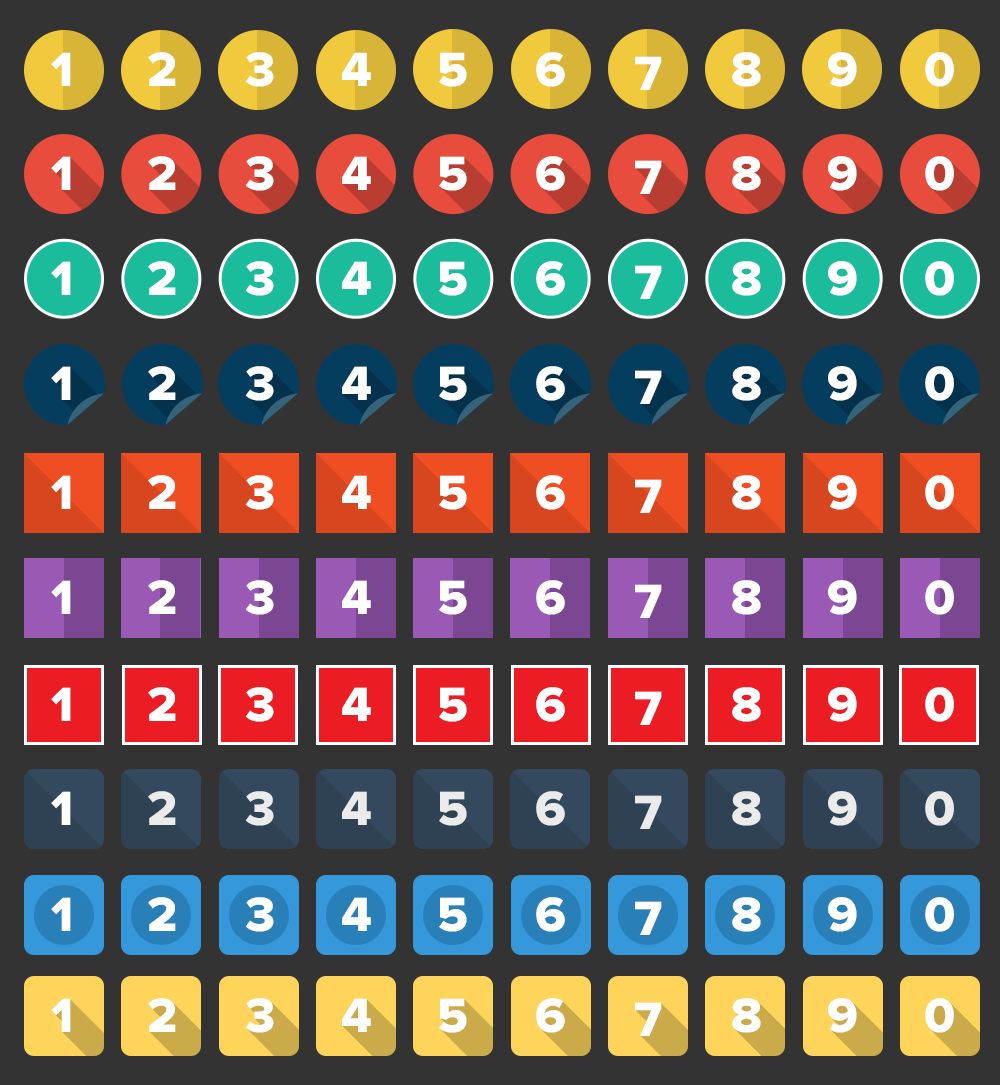
<style>
.page{position:relative;width:1000px;height:1085px;background:#333333}
.page>*{position:absolute;margin:0}
.t1{font:50px "ProximaNova-Extrabld";color:#ffffff}
.t2{font:50px "ProximaNova-Extrabld";color:#ebebeb}
</style>
<div class="page">
<p class="t1" style="left:51px;top:52px;width:20px;height:34px">1</p>
<p class="t1" style="left:148px;top:52px;width:28px;height:34px">2</p>
<p class="t1" style="left:245px;top:52px;width:29px;height:35px">3</p>
<p class="t1" style="left:342px;top:52px;width:29px;height:34px">4</p>
<p class="t1" style="left:439px;top:52px;width:28px;height:35px">5</p>
<p class="t1" style="left:536px;top:52px;width:29px;height:35px">6</p>
<p class="t1" style="left:732px;top:52px;width:29px;height:35px">8</p>
<p class="t1" style="left:828px;top:52px;width:29px;height:35px">9</p>
<p class="t1" style="left:925px;top:52px;width:29px;height:35px">0</p>
<p class="t1" style="left:635px;top:56px;width:27px;height:34px">7</p>
<p class="t1" style="left:51px;top:156px;width:20px;height:34px">1</p>
<p class="t1" style="left:148px;top:156px;width:28px;height:34px">2</p>
<p class="t1" style="left:245px;top:156px;width:29px;height:35px">3</p>
<p class="t1" style="left:342px;top:156px;width:29px;height:34px">4</p>
<p class="t1" style="left:439px;top:156px;width:28px;height:35px">5</p>
<p class="t1" style="left:536px;top:156px;width:29px;height:35px">6</p>
<p class="t1" style="left:635px;top:160px;width:27px;height:34px">7</p>
<p class="t1" style="left:732px;top:156px;width:29px;height:35px">8</p>
<p class="t1" style="left:828px;top:156px;width:29px;height:35px">9</p>
<p class="t1" style="left:925px;top:156px;width:29px;height:35px">0</p>
<p class="t1" style="left:51px;top:261px;width:20px;height:34px">1</p>
<p class="t1" style="left:148px;top:261px;width:28px;height:34px">2</p>
<p class="t1" style="left:245px;top:261px;width:29px;height:35px">3</p>
<p class="t1" style="left:342px;top:261px;width:29px;height:34px">4</p>
<p class="t1" style="left:439px;top:261px;width:28px;height:35px">5</p>
<p class="t1" style="left:536px;top:261px;width:29px;height:35px">6</p>
<p class="t1" style="left:635px;top:265px;width:27px;height:34px">7</p>
<p class="t1" style="left:732px;top:261px;width:29px;height:35px">8</p>
<p class="t1" style="left:828px;top:261px;width:29px;height:35px">9</p>
<p class="t1" style="left:925px;top:261px;width:29px;height:35px">0</p>
<p class="t1" style="left:51px;top:366px;width:20px;height:34px">1</p>
<p class="t1" style="left:148px;top:366px;width:28px;height:34px">2</p>
<p class="t1" style="left:245px;top:366px;width:29px;height:35px">3</p>
<p class="t1" style="left:342px;top:366px;width:29px;height:34px">4</p>
<p class="t1" style="left:439px;top:366px;width:28px;height:35px">5</p>
<p class="t1" style="left:536px;top:366px;width:29px;height:35px">6</p>
<p class="t1" style="left:732px;top:366px;width:29px;height:35px">8</p>
<p class="t1" style="left:828px;top:366px;width:29px;height:35px">9</p>
<p class="t1" style="left:925px;top:366px;width:29px;height:35px">0</p>
<p class="t1" style="left:635px;top:370px;width:27px;height:34px">7</p>
<p class="t1" style="left:51px;top:475px;width:20px;height:34px">1</p>
<p class="t1" style="left:148px;top:475px;width:28px;height:34px">2</p>
<p class="t1" style="left:245px;top:475px;width:29px;height:35px">3</p>
<p class="t1" style="left:342px;top:475px;width:29px;height:34px">4</p>
<p class="t1" style="left:439px;top:475px;width:28px;height:35px">5</p>
<p class="t1" style="left:536px;top:475px;width:29px;height:35px">6</p>
<p class="t1" style="left:635px;top:479px;width:27px;height:34px">7</p>
<p class="t1" style="left:732px;top:475px;width:29px;height:35px">8</p>
<p class="t1" style="left:828px;top:475px;width:29px;height:35px">9</p>
<p class="t1" style="left:925px;top:475px;width:29px;height:35px">0</p>
<p class="t1" style="left:51px;top:580px;width:20px;height:34px">1</p>
<p class="t1" style="left:148px;top:580px;width:28px;height:34px">2</p>
<p class="t1" style="left:245px;top:580px;width:29px;height:35px">3</p>
<p class="t1" style="left:342px;top:580px;width:29px;height:34px">4</p>
<p class="t1" style="left:439px;top:580px;width:28px;height:35px">5</p>
<p class="t1" style="left:536px;top:580px;width:29px;height:35px">6</p>
<p class="t1" style="left:732px;top:580px;width:29px;height:35px">8</p>
<p class="t1" style="left:828px;top:580px;width:29px;height:35px">9</p>
<p class="t1" style="left:925px;top:580px;width:29px;height:35px">0</p>
<p class="t1" style="left:635px;top:584px;width:27px;height:34px">7</p>
<p class="t1" style="left:51px;top:687px;width:20px;height:34px">1</p>
<p class="t1" style="left:148px;top:687px;width:28px;height:34px">2</p>
<p class="t1" style="left:245px;top:687px;width:29px;height:35px">3</p>
<p class="t1" style="left:342px;top:687px;width:29px;height:34px">4</p>
<p class="t1" style="left:439px;top:687px;width:28px;height:35px">5</p>
<p class="t1" style="left:536px;top:687px;width:29px;height:35px">6</p>
<p class="t1" style="left:732px;top:687px;width:29px;height:35px">8</p>
<p class="t1" style="left:828px;top:687px;width:29px;height:35px">9</p>
<p class="t1" style="left:925px;top:687px;width:29px;height:35px">0</p>
<p class="t1" style="left:635px;top:691px;width:27px;height:34px">7</p>
<p class="t1" style="left:51px;top:791px;width:20px;height:34px">1</p>
<p class="t2" style="left:148px;top:791px;width:28px;height:34px">2</p>
<p class="t2" style="left:245px;top:791px;width:29px;height:35px">3</p>
<p class="t2" style="left:342px;top:791px;width:29px;height:34px">4</p>
<p class="t2" style="left:439px;top:791px;width:28px;height:35px">5</p>
<p class="t2" style="left:536px;top:791px;width:29px;height:35px">6</p>
<p class="t2" style="left:635px;top:795px;width:27px;height:34px">7</p>
<p class="t2" style="left:732px;top:791px;width:29px;height:35px">8</p>
<p class="t2" style="left:828px;top:791px;width:29px;height:35px">9</p>
<p class="t2" style="left:925px;top:791px;width:29px;height:35px">0</p>
<p class="t1" style="left:51px;top:897px;width:20px;height:34px">1</p>
<p class="t1" style="left:148px;top:897px;width:28px;height:34px">2</p>
<p class="t1" style="left:245px;top:897px;width:29px;height:35px">3</p>
<p class="t1" style="left:342px;top:897px;width:29px;height:34px">4</p>
<p class="t1" style="left:439px;top:897px;width:28px;height:35px">5</p>
<p class="t1" style="left:536px;top:897px;width:29px;height:35px">6</p>
<p class="t1" style="left:635px;top:901px;width:27px;height:34px">7</p>
<p class="t1" style="left:732px;top:897px;width:29px;height:35px">8</p>
<p class="t1" style="left:828px;top:897px;width:29px;height:35px">9</p>
<p class="t1" style="left:925px;top:897px;width:29px;height:35px">0</p>
<p class="t1" style="left:51px;top:998px;width:20px;height:34px">1</p>
<p class="t1" style="left:148px;top:998px;width:28px;height:34px">2</p>
<p class="t1" style="left:245px;top:998px;width:29px;height:35px">3</p>
<p class="t1" style="left:342px;top:998px;width:29px;height:34px">4</p>
<p class="t1" style="left:439px;top:998px;width:28px;height:35px">5</p>
<p class="t1" style="left:536px;top:998px;width:29px;height:35px">6</p>
<p class="t1" style="left:732px;top:998px;width:29px;height:35px">8</p>
<p class="t1" style="left:828px;top:998px;width:29px;height:35px">9</p>
<p class="t1" style="left:925px;top:998px;width:29px;height:35px">0</p>
<p class="t1" style="left:635px;top:1002px;width:27px;height:34px">7</p>
</div>
